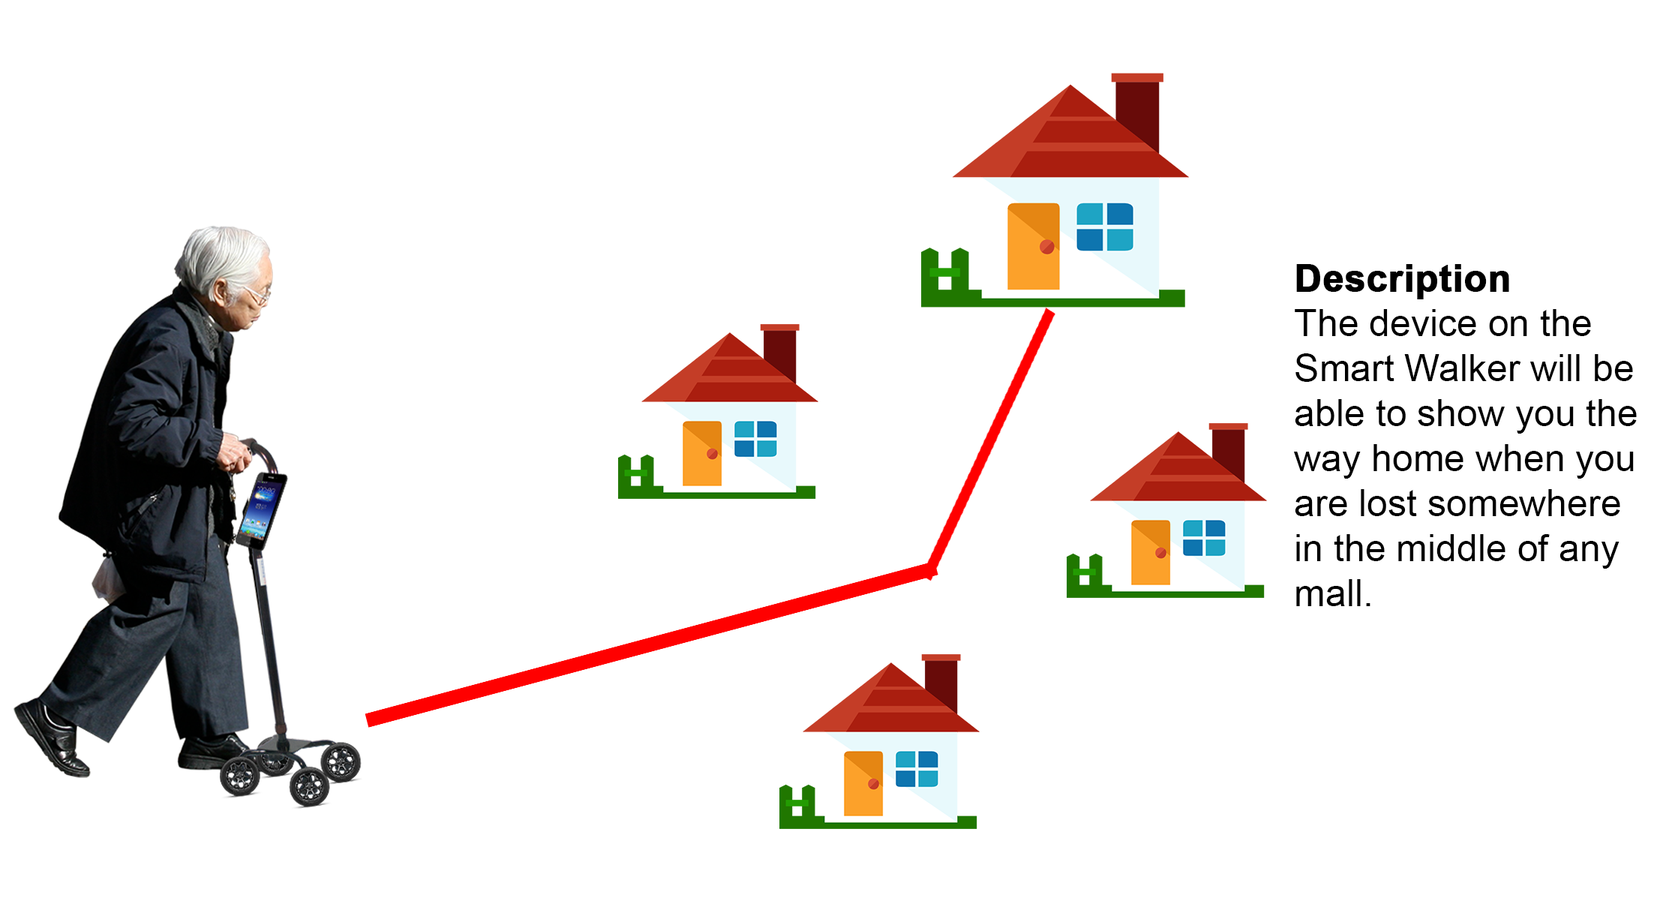
<style>
.page{position:relative;width:1657px;height:910px;background:#ffffff}
.page>*{position:absolute;margin:0}
.t1{font:9px "ArialMT";color:#000000}
.t2{font:9px "Arial-BoldMT";color:#000000;font-weight:bold}
</style>
<div class="page">
<p class="t1" style="left:1294px;top:264px;width:342px;height:342px"><span class="t2">Description<br></span>The device on the <br>Smart Walker will be <br>able to show you the <br>way home when you<br>are lost somewhere<br>in the middle of any <br>mall.</p>
</div>
